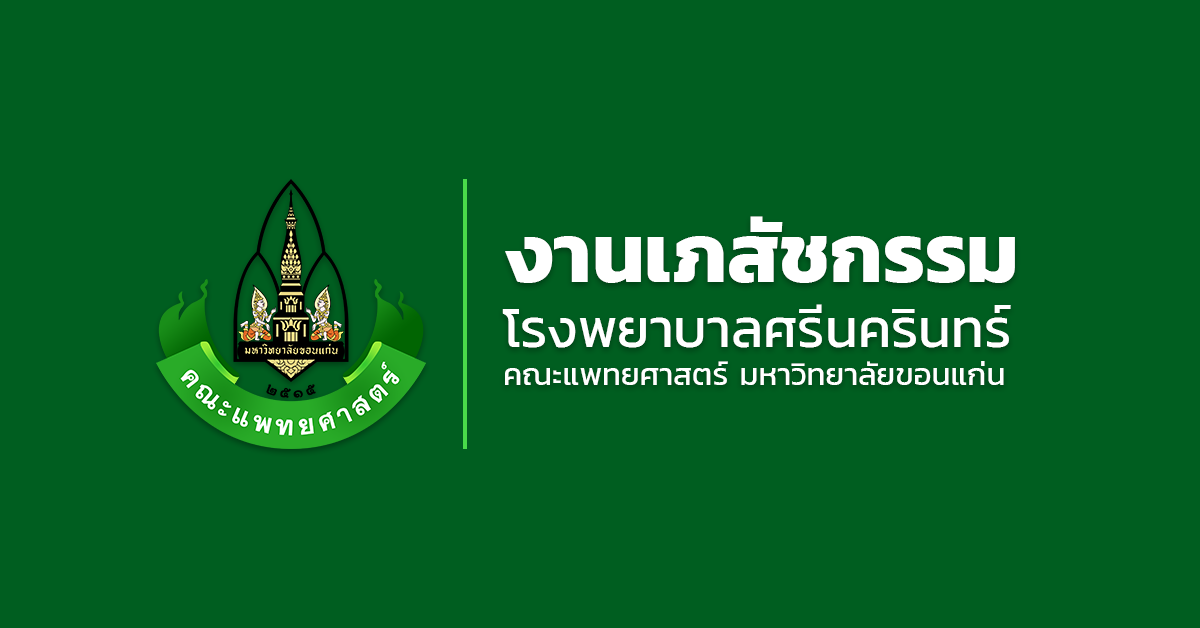
<style>
.page{position:relative;width:1200px;height:628px;background:#005e20}
.page>*{position:absolute;margin:0}
.t1{font:31.2px "Kanit-Regular";color:#ffffff}
.t2{font:83.3px "Kanit-Bold";color:#ffffff}
.t3{font:54.2px "Kanit-Regular";color:#ffffff}
</style>
<div class="page">
<p class="t1" style="left:502px;top:216px;width:513px;height:169px"><span class="t2">งานเภสัชกรรม<br></span><span class="t3">โรงพยาบาลศรีนครินทร์<br></span>คณะแพทยศาสตร์ มหาวิทยาลัยขอนแก่น</p>
</div>
